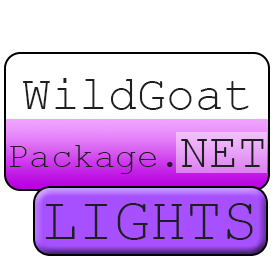
<style>
.page{position:relative;width:275px;height:275px;background:#ffffff}
.page>*{position:absolute;margin:0}
.t1{font:48px "CourierNewPSMT";color:#1e1e1e}
.t2{font:36px "CourierNewPSMT";color:#1e1e1e}
.t3{font:60px "CourierNewPSMT";color:#1e1e1e}
</style>
<div class="page">
<p class="t1" style="left:10px;top:78px;width:254px;height:96px;text-align:center">WildGoat<br><span class="t2">Package.</span>NET</p>
<p class="t3" style="left:45px;top:203px;width:208px;height:37px">LIGHTS</p>
</div>
